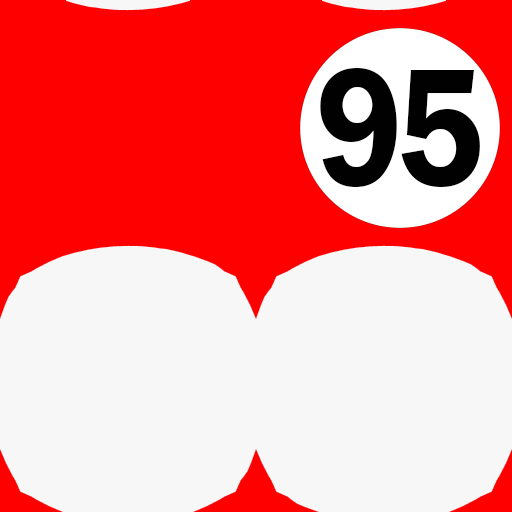
<style>
.page{position:relative;width:512px;height:512px;background:#f7f7f7}
.page>*{position:absolute;margin:0}
.t1{font:172.5px "FranklinGothic-Demi";letter-spacing:-0.05em;color:#010101;scale:0.87 1}
</style>
<div class="page">
<p class="t1" style="left:320px;top:68px;width:160px;height:119px">95</p>
</div>
